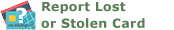
<style>
.page{position:relative;width:174px;height:30px;background:#ffffff}
.page>*{position:absolute;margin:0}
.t1{font:12.5px/16.7px "Verdana-Bold";letter-spacing:0.025em;color:#587d52}
</style>
<div class="page">
<p class="t1" style="left:41px;top:2px;width:104px;height:26px">Report Lost <br>or Stolen Card</p>
</div>
